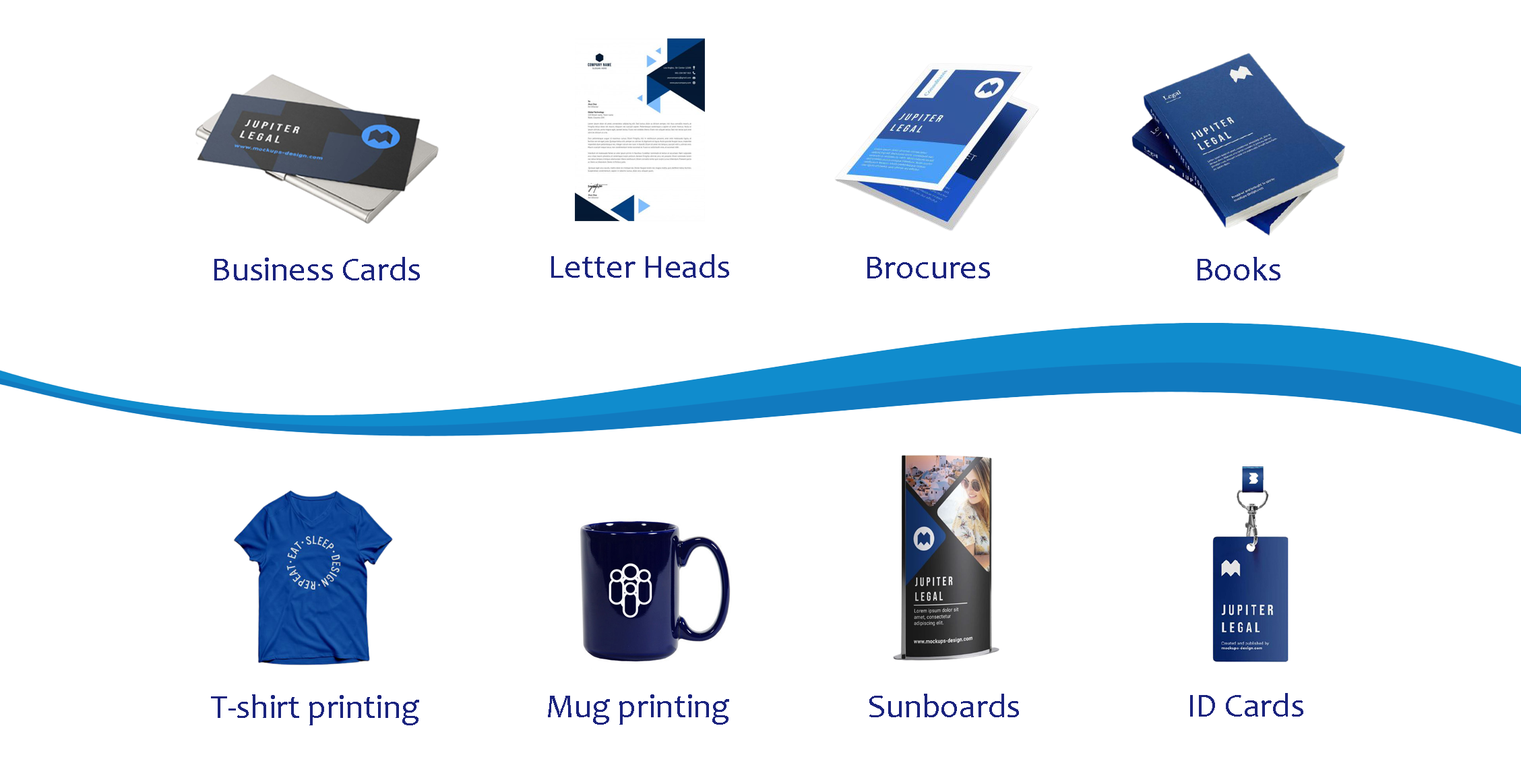
<style>
.page{position:relative;width:1521px;height:784px;background:#ffffff}
.page>*{position:absolute;margin:0}
.t1{font:33.7px "Candara";color:#1a237e}
</style>
<div class="page">
<p class="t1" style="left:214px;top:257px;width:206px;height:23px">Business Cards</p>
<p class="t1" style="left:551px;top:254px;width:178px;height:24px">Letter Heads</p>
<p class="t1" style="left:867px;top:257px;width:123px;height:21px">Brocures</p>
<p class="t1" style="left:1198px;top:257px;width:83px;height:23px">Books</p>
<p class="t1" style="left:211px;top:694px;width:208px;height:31px">T-shirt printing</p>
<p class="t1" style="left:548px;top:694px;width:181px;height:31px">Mug printing</p>
<p class="t1" style="left:869px;top:694px;width:150px;height:23px">Sunboards</p>
<p class="t1" style="left:1190px;top:693px;width:114px;height:23px">ID Cards</p>
</div>
